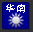
<style>
.page{position:relative;width:33px;height:32px;background:#000090}
.page>*{position:absolute;margin:0}
.t1{font:10.4px "SimSun";color:#ffffff}
</style>
<div class="page">
<p class="t1" style="left:6px;top:4px;width:19px;height:9px">华南</p>
</div>
